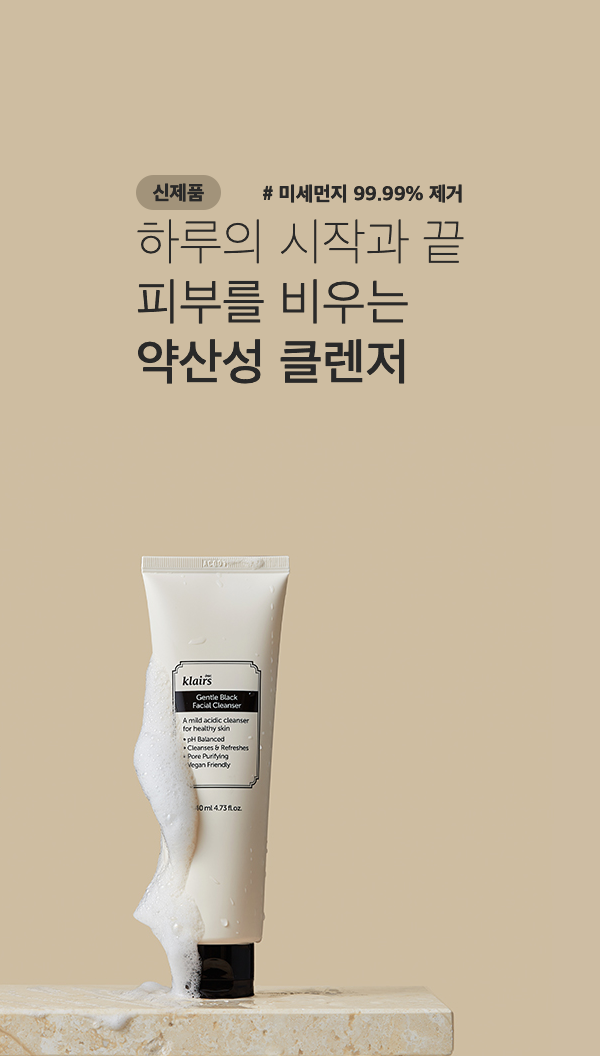
<style>
.page{position:relative;width:600px;height:1056px;background:#cebda1}
.page>*{position:absolute;margin:0}
.t1{font:20px "AppleSDGothicNeoEB00";letter-spacing:0.002em;color:#292929}
.t2{font:50px "AppleSDGothicNeoT00";letter-spacing:0.002em;color:#292929}
.t3{font:50px "AppleSDGothicNeoUL00";letter-spacing:0.002em;color:#292929}
.t4{font:50px "AppleSDGothicNeoM00";letter-spacing:0.002em;color:#292929}
</style>
<div class="page">
<p class="t1" style="left:153px;top:183px;width:51px;height:19px">신제품</p>
<p class="t1" style="left:263px;top:184px;width:199px;height:19px"># 미세먼지 99.99% 제거</p>
<p class="t2" style="left:137px;top:219px;width:327px;height:45px">하루의 시작과 끝</p>
<p class="t3" style="left:137px;top:279px;width:271px;height:105px;text-align:right">피부를 비우는 <br><span class="t4">약산성 클렌저</span></p>
</div>
